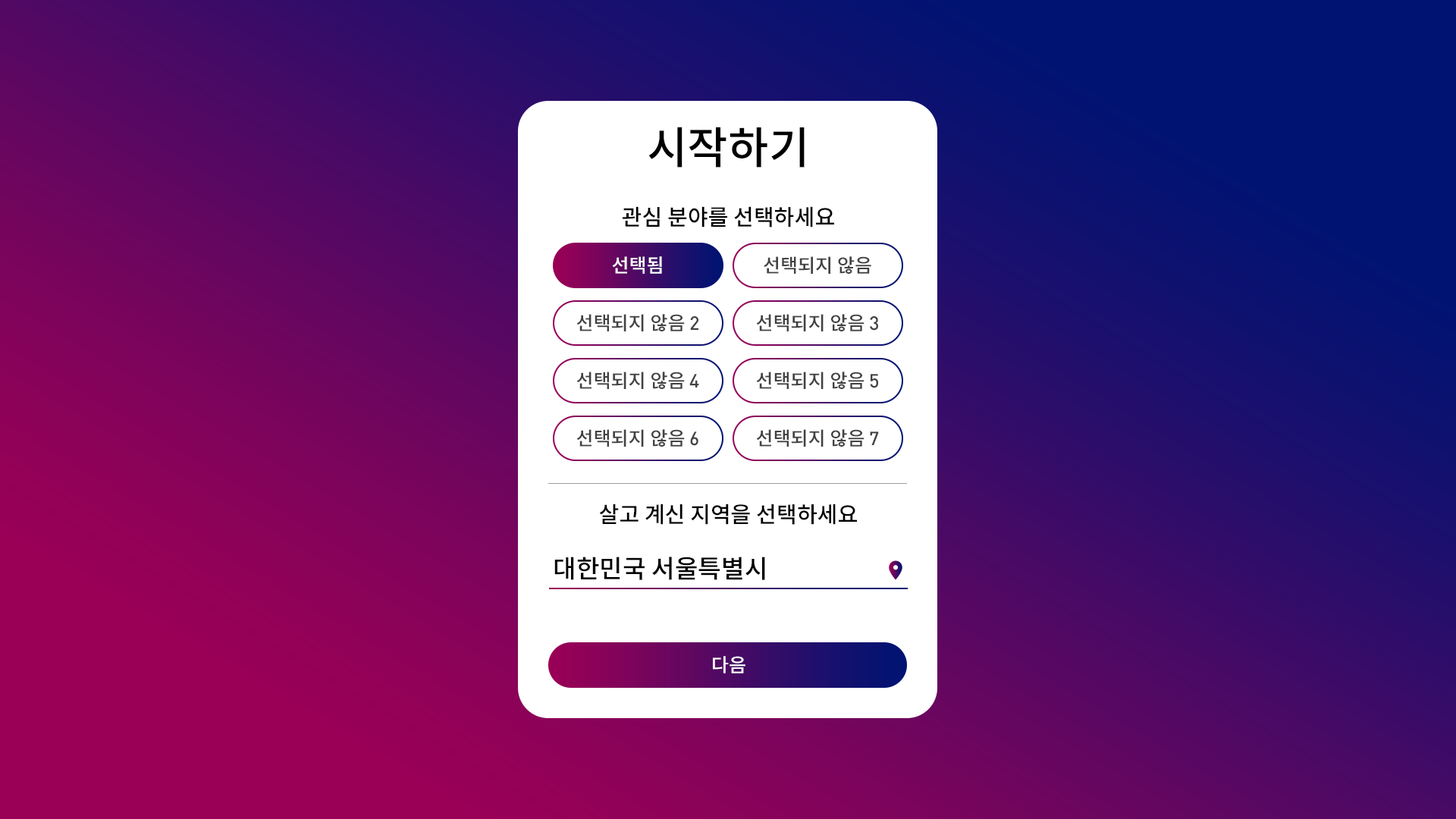
<style>
.page{position:relative;width:1456px;height:819px}
.page>*{position:absolute;margin:0}
.t1{font:44.2px "NotoSansCJKkr-Medium";color:#000000}
.t2{font:22.1px "NotoSansCJKkr-Medium";color:#000000}
.t3{font:19px "NotoSansCJKkr-Medium";color:#ffffff}
.t4{font:19px "NotoSansCJKkr-Medium";color:#424242}
.t5{font:19px "DIN-Medium";color:#424242}
.t6{font:25.3px "NotoSansCJKkr-Medium";color:#000000}
</style>
<div class="page">
<p class="t1" style="left:648px;top:127px;width:157px;height:41px">시작하기</p>
<p class="t2" style="left:622px;top:206px;width:212px;height:21px">관심 분야를 선택하세요</p>
<p class="t3" style="left:612px;top:256px;width:50px;height:18px">선택됨</p>
<p class="t4" style="left:764px;top:256px;width:107px;height:18px">선택되지 않음</p>
<p class="t4" style="left:576px;top:314px;width:122px;height:17px">선택되지 않음 <span class="t5">2</span></p>
<p class="t4" style="left:756px;top:314px;width:122px;height:17px">선택되지 않음 <span class="t5">3</span></p>
<p class="t4" style="left:576px;top:372px;width:123px;height:17px">선택되지 않음 <span class="t5">4</span></p>
<p class="t4" style="left:756px;top:372px;width:122px;height:17px">선택되지 않음 <span class="t5">5</span></p>
<p class="t4" style="left:576px;top:429px;width:122px;height:18px">선택되지 않음 <span class="t5">6</span></p>
<p class="t4" style="left:756px;top:429px;width:123px;height:18px">선택되지 않음 <span class="t5">7</span></p>
<p class="t2" style="left:599px;top:504px;width:258px;height:21px">살고 계신 지역을 선택하세요</p>
<p class="t6" style="left:554px;top:557px;width:211px;height:23px">대한민국 서울특별시</p>
<p class="t3" style="left:713px;top:656px;width:32px;height:17px">다음</p>
</div>
